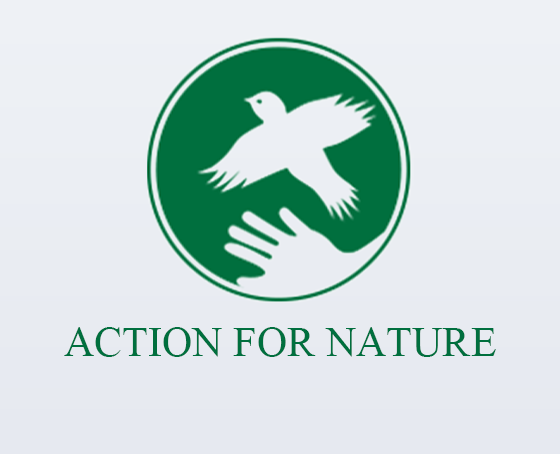
<style>
.page{position:relative;width:560px;height:454px}
.page>*{position:absolute;margin:0}
.t1{font:42.1px "TimesNewRomanPSMT";color:#006f3e}
</style>
<div class="page">
<p class="t1" style="left:64px;top:327px;width:432px;height:30px">ACTION FOR NATURE</p>
</div>
